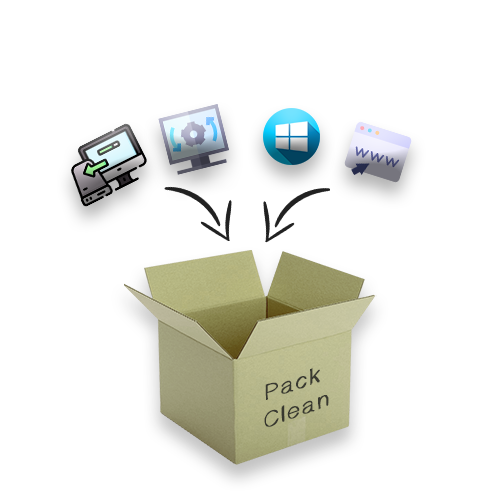
<style>
.page{position:relative;width:500px;height:500px;background:#ffffff}
.page>*{position:absolute;margin:0}
.t1{font:22.6px "Sketchtica";color:#212121;font-weight:bold;scale:1.13 1}
</style>
<div class="page">
<p class="t1" style="left:264px;top:368px;width:65px;height:59px;text-align:center;rotate:-20deg;opacity:0.9">Pack <br>Clean</p>
</div>
